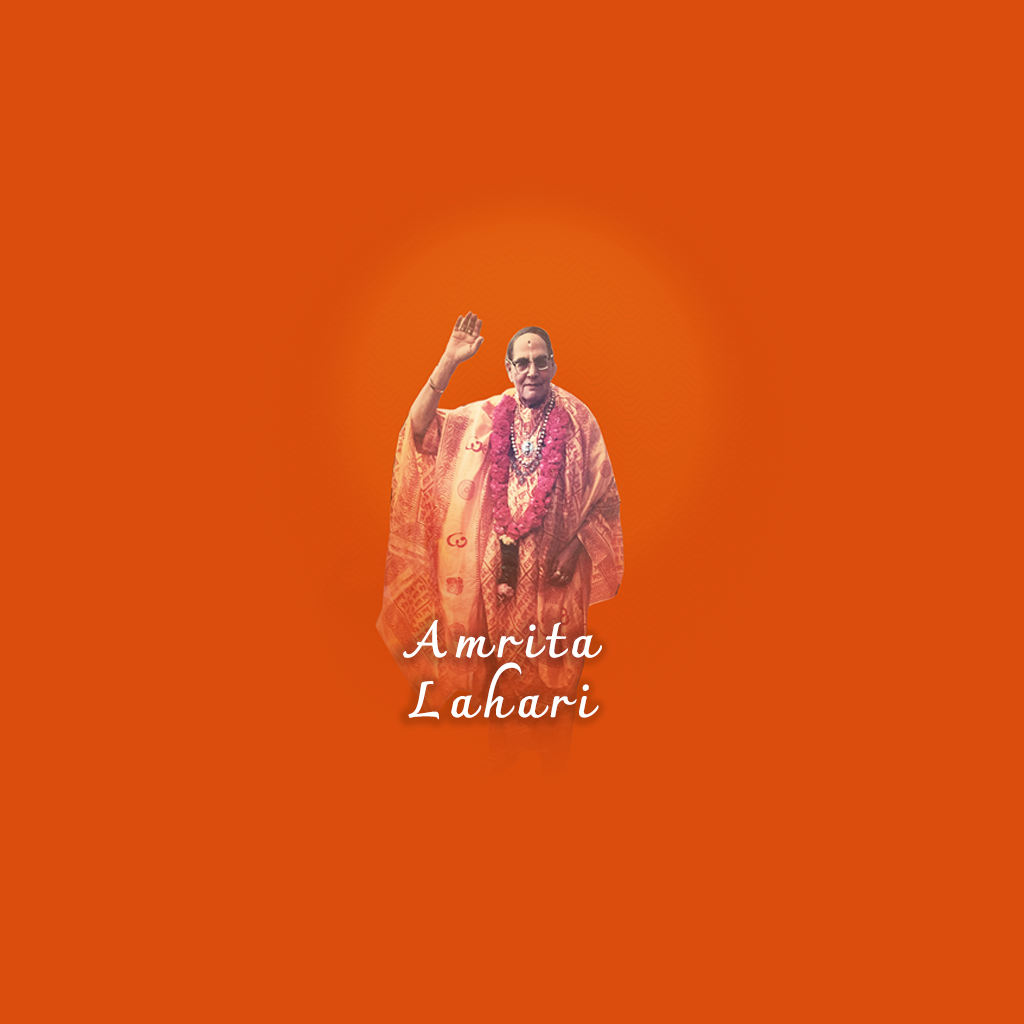
<style>
.page{position:relative;width:1024px;height:1024px;background:#da4d0d}
.page>*{position:absolute;margin:0}
.t1{font:50px "Charmonman-Bold";letter-spacing:0.14em;color:#ffffff}
</style>
<div class="page">
<p class="t1" style="left:403px;top:620px;width:199px;height:100px;text-align:center">Amrita<br>Lahari</p>
</div>
